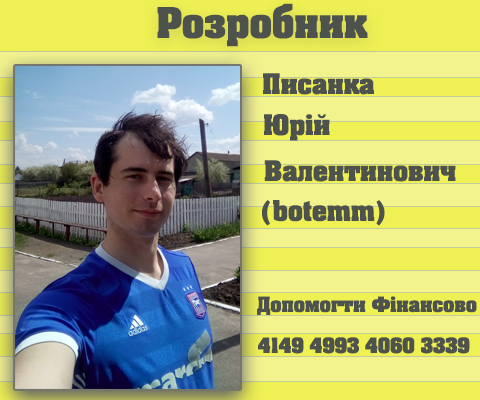
<style>
.page{position:relative;width:480px;height:400px}
.page>*{position:absolute;margin:0}
.t1{font:36px "AGAalenBold-Roman";color:#4e524d}
.t2{font:24px "AGAalenBold-Roman";color:#4e524d}
.t3{font:18px "AGAalenBold-Roman";color:#4e524d}
</style>
<div class="page">
<p class="t1" style="left:157px;top:3px;width:211px;height:44px">Розробник</p>
<p class="t2" style="left:263px;top:73px;width:111px;height:22px">Писанка</p>
<p class="t2" style="left:264px;top:114px;width:66px;height:27px">Юрій</p>
<p class="t2" style="left:264px;top:160px;width:192px;height:22px">Валентинович</p>
<p class="t2" style="left:262px;top:200px;width:123px;height:26px">(botemm)</p>
<p class="t3" style="left:257px;top:296px;width:220px;height:19px">Допомогти Фінансово</p>
<p class="t3" style="left:258px;top:337px;width:212px;height:17px">4149 4993 4060 3339</p>
</div>
